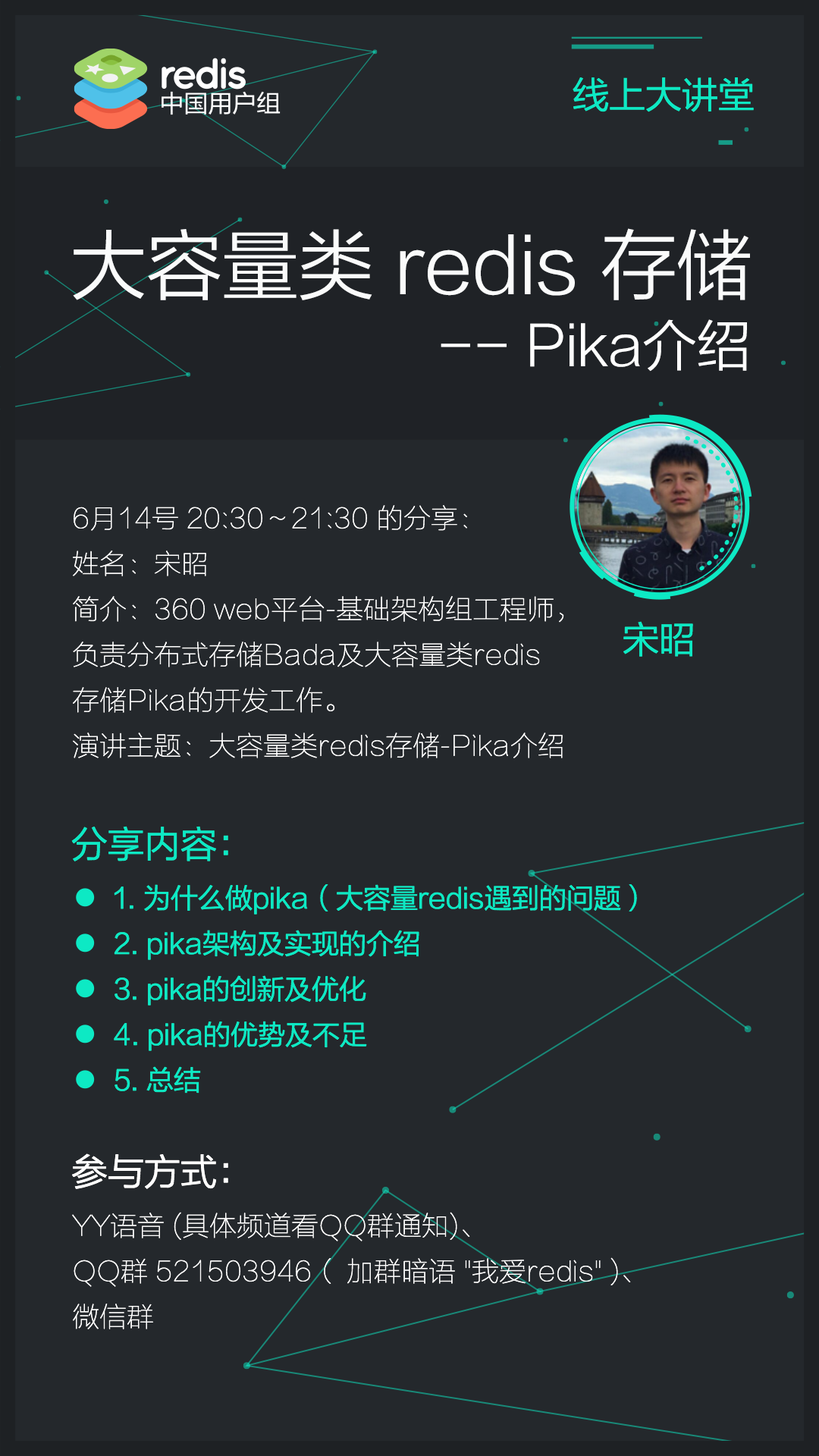
<style>
.page{position:relative;width:819px;height:1456px;background:#24282c}
.page>*{position:absolute;margin:0}
.t1{font:36.4px "FZLTXIHK--GBK1-0";color:#0de9c4}
.t2{font:75.8px "FZLTXIHK--GBK1-0";color:#fafbfb}
.t3{font:54.6px "FZLTXIHK--GBK1-0";color:#ffffff}
.t4{font:27.3px/45.5px "FZLTCXHK--GBK1-0";color:#ffffff}
.t5{font:27.3px/45.5px "FZLTXIHK--GBK1-0";color:#0de9c4}
.t6{font:36.4px "FZLTXIHK--GBK1-0";color:#ffffff}
</style>
<div class="page">
<p class="t1" style="left:573px;top:77px;width:181px;height:35px">线上大讲堂</p>
<p class="t2" style="left:73px;top:228px;width:677px;height:72px">大容量类 redis 存储</p>
<p class="t3" style="left:441px;top:319px;width:306px;height:53px">-- Pika介绍</p>
<p class="t4" style="left:73px;top:505px;width:491px;height:253px">6月14号 20:30～21:30 的分享：<br>姓名：宋昭<br>简介：360 web平台-基础架构组工程师，<br>负责分布式存储Bada及大容量类redis<br>存储Pika的开发工作。<br>演讲主题：大容量类redis存储-Pika介绍</p>
<p class="t1" style="left:623px;top:621px;width:70px;height:36px">宋昭</p>
<p class="t1" style="left:71px;top:826px;width:157px;height:35px">分享内容：</p>
<p class="t5" style="left:114px;top:884px;width:523px;height:210px">1. 为什么做pika（大容量redis遇到的问题）<br>2. pika架构及实现的介绍<br>3. pika的创新及优化<br>4. pika的优势及不足<br>5. 总结</p>
<p class="t6" style="left:72px;top:1153px;width:156px;height:36px">参与方式：</p>
<p class="t4" style="left:72px;top:1212px;width:559px;height:117px">YY语音 (具体频道看QQ群通知)、<br>QQ群 521503946（ 加群暗语 "我爱redis" )、<br>微信群</p>
</div>
